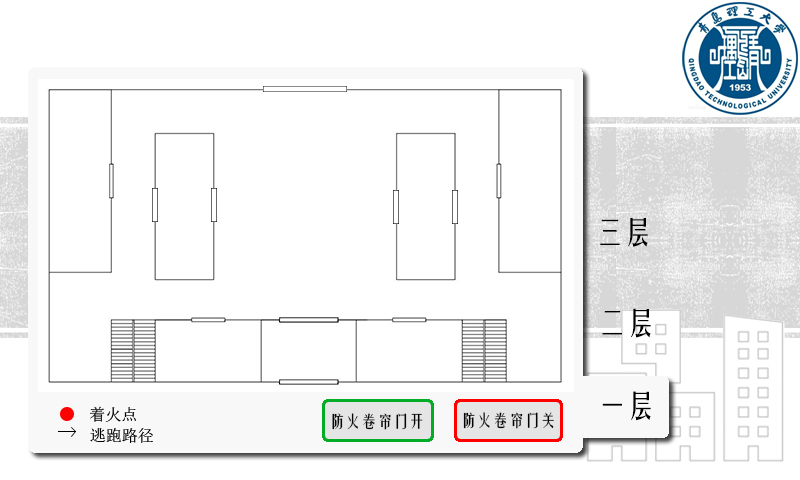
<style>
.page{position:relative;width:800px;height:480px;background:#ffffff}
.page>*{position:absolute;margin:0}
.t1{font:29.3px "FZYTK--GBK1-0";color:#000000}
.t2{font:12px "FZYTK--GBK1-0";color:#060606}
.t3{font:16px "FZYTK--GBK1-0";color:#040404}
</style>
<div class="page">
<p class="t1" style="left:600px;top:218px;width:48px;height:29px">三层</p>
<p class="t1" style="left:602px;top:308px;width:49px;height:30px">二层</p>
<p class="t1" style="left:602px;top:391px;width:49px;height:30px">一层</p>
<p class="t2" style="left:332px;top:413px;width:91px;height:17px">防火卷帘门开</p>
<p class="t3" style="left:463px;top:412px;width:91px;height:17px">防火卷帘门关</p>
</div>
